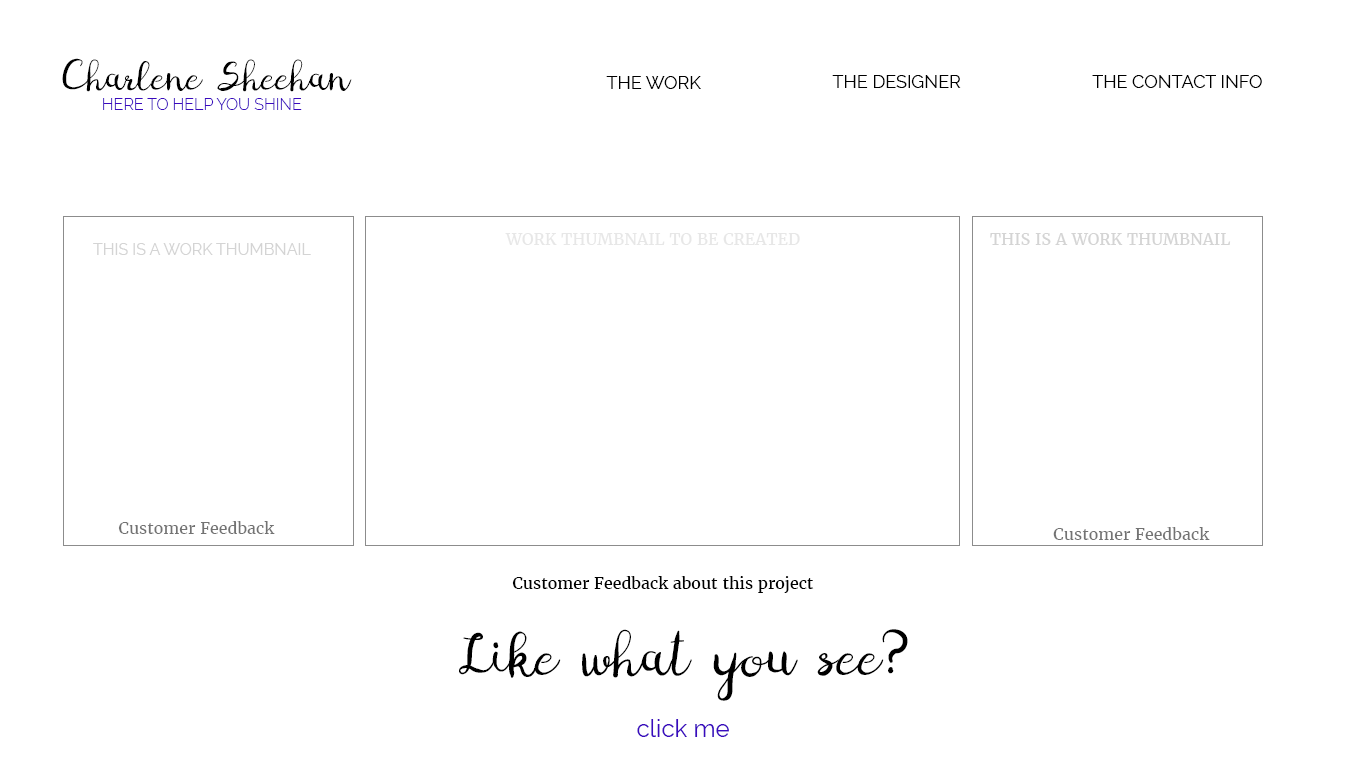
<style>
.page{position:relative;width:1366px;height:768px;background:#ffffff}
.page>*{position:absolute;margin:0}
.t1{font:20px "Digory_Doodles_PS";color:#000000}
.t2{font:18px "Raleway-Regular";color:#000000;text-transform:uppercase}
.t3{font:16px "Raleway-Light";color:#3a0abe;text-transform:uppercase}
.t4{font:16px "Merriweather-Regular";color:#e7e7e7}
.t5{font:16px "Merriweather-Regular";color:#d4d4d4}
.t6{font:18px "MyriadPro-Regular";color:#d4d4d4}
.t7{font:16px "Raleway-Regular";color:#d4d4d4}
.t8{font:16px "Merriweather-Regular";color:#737373}
.t9{font:16px "Merriweather-Regular";color:#000000}
.t10{font:30px "Digory_Doodles_PS";color:#000000}
.t11{font:24px "Raleway-Regular";color:#3a0abe}
</style>
<div class="page">
<p class="t1" style="left:62px;top:58px;width:290px;height:34px">Charlene Sheehan</p>
<p class="t2" style="left:606px;top:76px;width:95px;height:13px">THE WORK</p>
<p class="t2" style="left:832px;top:75px;width:129px;height:13px">THE DESIGNER</p>
<p class="t2" style="left:1092px;top:75px;width:170px;height:13px">THE CONTACT INFO</p>
<p class="t3" style="left:103px;top:98px;width:199px;height:12px">here to help you shine</p>
<p class="t4" style="left:505px;top:233px;width:295px;height:12px">WORK THUMBNAIL TO BE CREATED</p>
<p class="t5" style="left:990px;top:233px;width:241px;height:12px"><span class="t6"><br></span><br>THIS IS A WORK THUMBNAIL</p>
<p class="t7" style="left:93px;top:243px;width:218px;height:12px">THIS IS A WORK THUMBNAIL</p>
<p class="t8" style="left:118px;top:521px;width:157px;height:13px">Customer Feedback</p>
<p class="t8" style="left:1053px;top:527px;width:157px;height:13px">Customer Feedback</p>
<p class="t9" style="left:512px;top:576px;width:302px;height:17px">Customer Feedback about this project</p>
<p class="t10" style="left:459px;top:629px;width:449px;height:72px;text-align:center">Like what you see?</p>
<p class="t11" style="left:637px;top:719px;width:92px;height:18px">click me</p>
</div>
